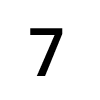
<style>
.page{position:relative;width:100px;height:100px;background:#ffffff}
.page>*{position:absolute;margin:0}
.t1{font:72px "Shruti-Bold";color:#000000}
</style>
<div class="page">
<p class="t1" style="left:30px;top:28px;width:33px;height:48px">7</p>
</div>
